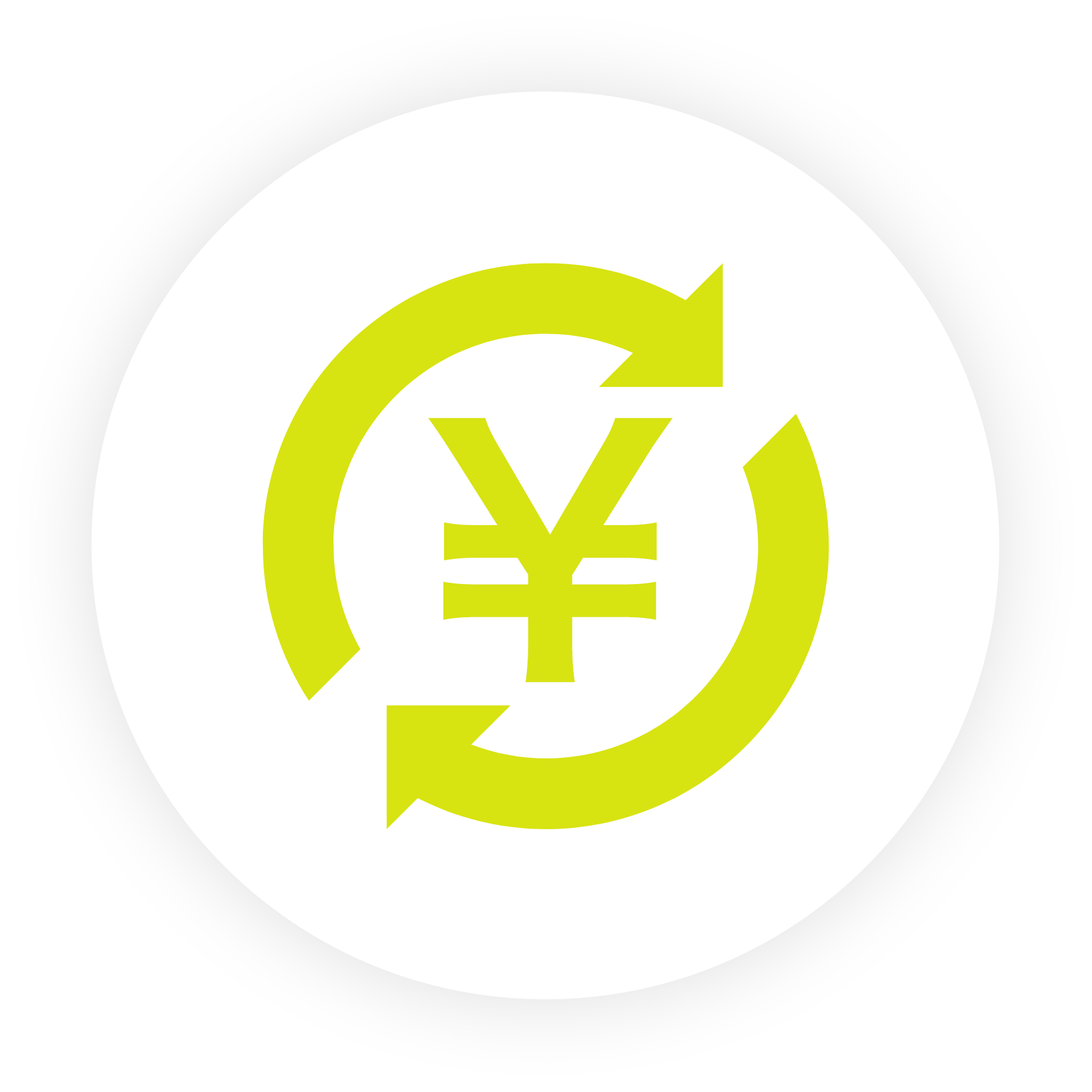
<style>
.page{position:relative;width:1092px;height:1092px;background:#ffffff}
.page>*{position:absolute;margin:0}
.t1{font:331.6px "HiraginoSansGB-W6";color:#d8e312}
</style>
<div class="page">
<p class="t1" style="left:428px;top:418px;width:245px;height:264px">¥</p>
</div>
